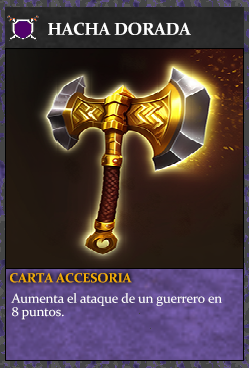
<style>
.page{position:relative;width:249px;height:368px}
.page>*{position:absolute;margin:0}
.t1{font:17.3px "Constantia-Bold";letter-spacing:-0.02em;color:#ffffff}
.t2{font:13.3px "Constantia-Bold";letter-spacing:-0.02em;color:#f2ac05}
.t3{font:13.3px/13.3px "Constantia";letter-spacing:-0.02em;color:#ffffff}
</style>
<div class="page">
<p class="t1" style="left:48px;top:22px;width:143px;height:13px">HACHA DORADA</p>
<p class="t2" style="left:10px;top:273px;width:122px;height:10px">CARTA ACCESORIA</p>
<p class="t3" style="left:11px;top:293px;width:211px;height:27px">Aumenta el ataque de un guerrero en<br>8 puntos.</p>
</div>
